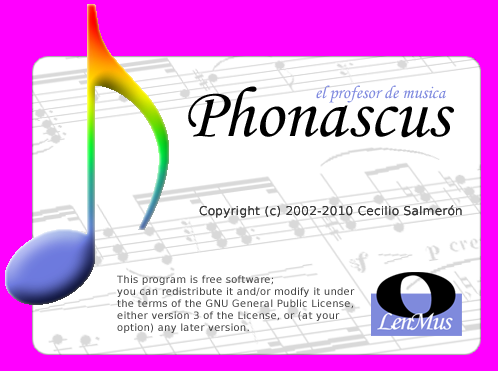
<style>
.page{position:relative;width:498px;height:371px;background:#ffffff}
.page>*{position:absolute;margin:0}
.t1{font:300px "LeMusNotas"}
.t2{font:72px "MonotypeCorsiva";color:#000000}
.t3{font:18px "MonotypeCorsiva";color:#7f8adf}
.t4{font:12px "BitstreamVeraSans-Roman";letter-spacing:0.025em;color:#373737}
.t5{font:10px "BitstreamVeraSans-Roman";letter-spacing:0.025em;color:#464646}
</style>
<div class="page">
<p class="t1" style="left:5px;top:4px;width:164px;height:301px">Q</p>
<p class="t2" style="left:188px;top:86px;width:266px;height:52px">Phonascus</p>
<p class="t3" style="left:316px;top:85px;width:130px;height:18px">el profesor de musica</p>
<p class="t4" style="left:199px;top:205px;width:263px;height:13px">Copyright (c) 2002-2010 Cecilio Salmerón</p>
<p class="t4" style="left:199px;top:205px;width:263px;height:13px">Copyright (c) 2002-2010 Cecilio Salmerón</p>
<p class="t5" style="left:117px;top:275px;width:238px;height:58px">This program is free software;<br>you can redistribute it and/or modify it under<br>the terms of the GNU General Public License,<br>either version 3 of the License, or (at your <br>option) any later version.</p>
</div>
